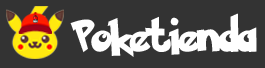
<style>
.page{position:relative;width:265px;height:68px;background:#333333}
.page>*{position:absolute;margin:0}
.t1{font:36px "PokemonSolidNormal";color:#ffffff}
</style>
<div class="page">
<p class="t1" style="left:70px;top:13px;width:187px;height:44px">Poketienda</p>
</div>
